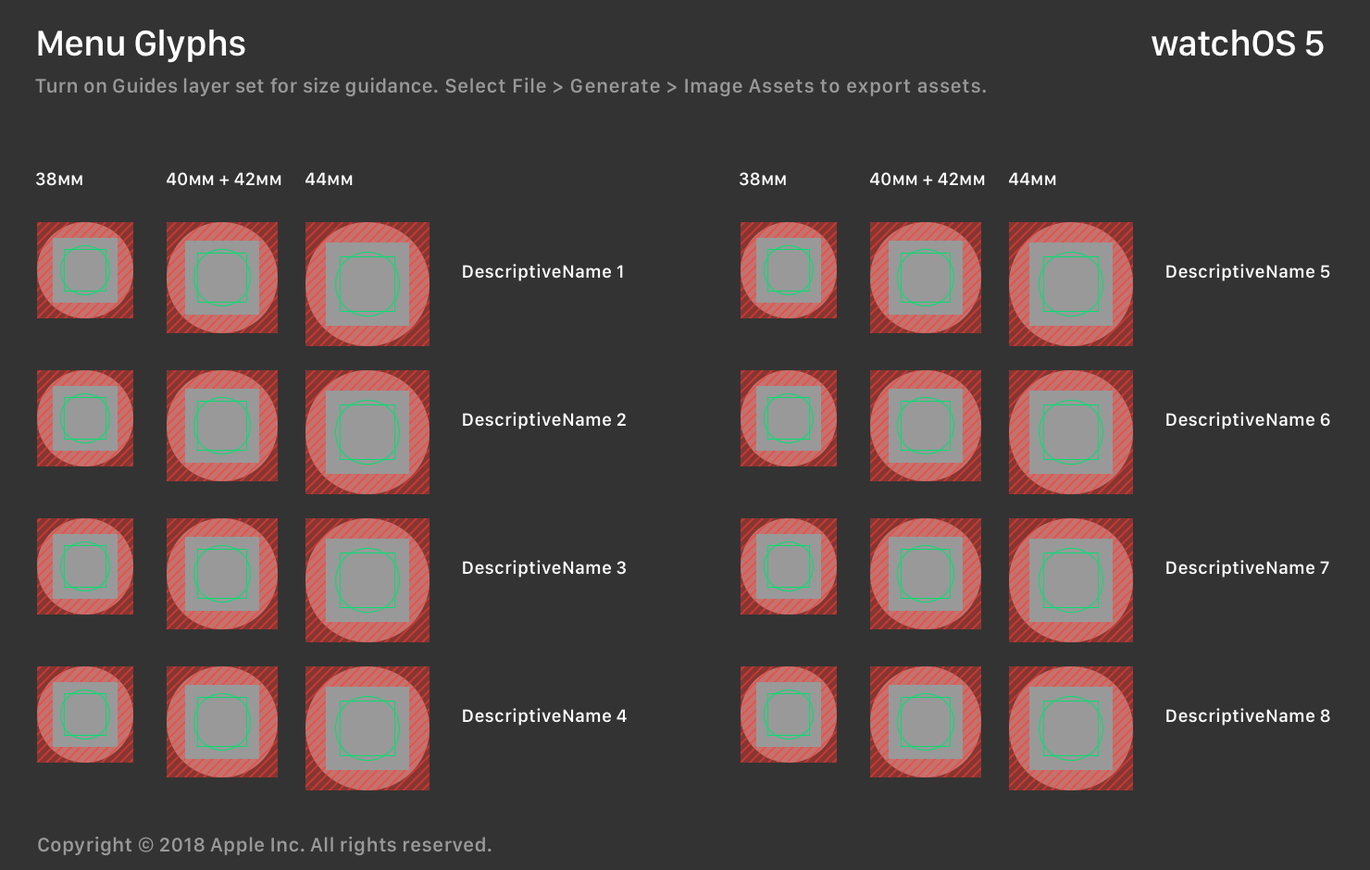
<style>
.page{position:relative;width:1370px;height:870px;background:#333333}
.page>*{position:absolute;margin:0}
.t1{font:37px "SFCompactText-Medium";letter-spacing:-0.026em;color:#ffffff}
.t2{font:20.4px "SFCompactText-Medium";letter-spacing:0.024em;color:#999999}
.t3{font:20.4px "SFCompactText-Medium";letter-spacing:0.006em;color:#999999}
.t4{font:18.5px "SFCompactText-Medium";color:#ffffff}
.t5{font:18.5px "SFCompactText-Medium";color:#ffffff;font-variant:small-caps}
.t6{font:18.5px/148.1px "SFCompactText-Medium";letter-spacing:0.006em;color:#ffffff}
</style>
<div class="page">
<p class="t1" style="left:38px;top:29px;width:207px;height:34px">Menu Glyphs</p>
<p class="t1" style="left:1152px;top:29px;width:172px;height:27px">watchOS 5</p>
<p class="t2" style="left:35px;top:77px;width:951px;height:20px"><span class="t3">Turn on Guides layer set for size guidance.</span> Select File &gt; Generate &gt; Image Assets to export assets.</p>
<p class="t4" style="left:36px;top:172px;width:46px;height:14px">38<span class="t5">mm</span></p>
<p class="t5" style="left:167px;top:172px;width:114px;height:14px"><span class="t4">40</span>mm + <span class="t4">42</span>mm</p>
<p class="t4" style="left:306px;top:172px;width:47px;height:13px">44<span class="t5">mm</span></p>
<p class="t4" style="left:740px;top:172px;width:46px;height:14px">38<span class="t5">mm</span></p>
<p class="t5" style="left:870px;top:172px;width:115px;height:14px"><span class="t4">40</span>mm + <span class="t4">42</span>mm</p>
<p class="t4" style="left:1009px;top:172px;width:47px;height:13px">44<span class="t5">mm</span></p>
<p class="t6" style="left:463px;top:264px;width:164px;height:462px">DescriptiveName 1<br>DescriptiveName 2<br>DescriptiveName 3<br>DescriptiveName 4</p>
<p class="t6" style="left:1167px;top:264px;width:163px;height:462px">DescriptiveName 5<br>DescriptiveName 6<br>DescriptiveName 7<br>DescriptiveName 8</p>
</div>
